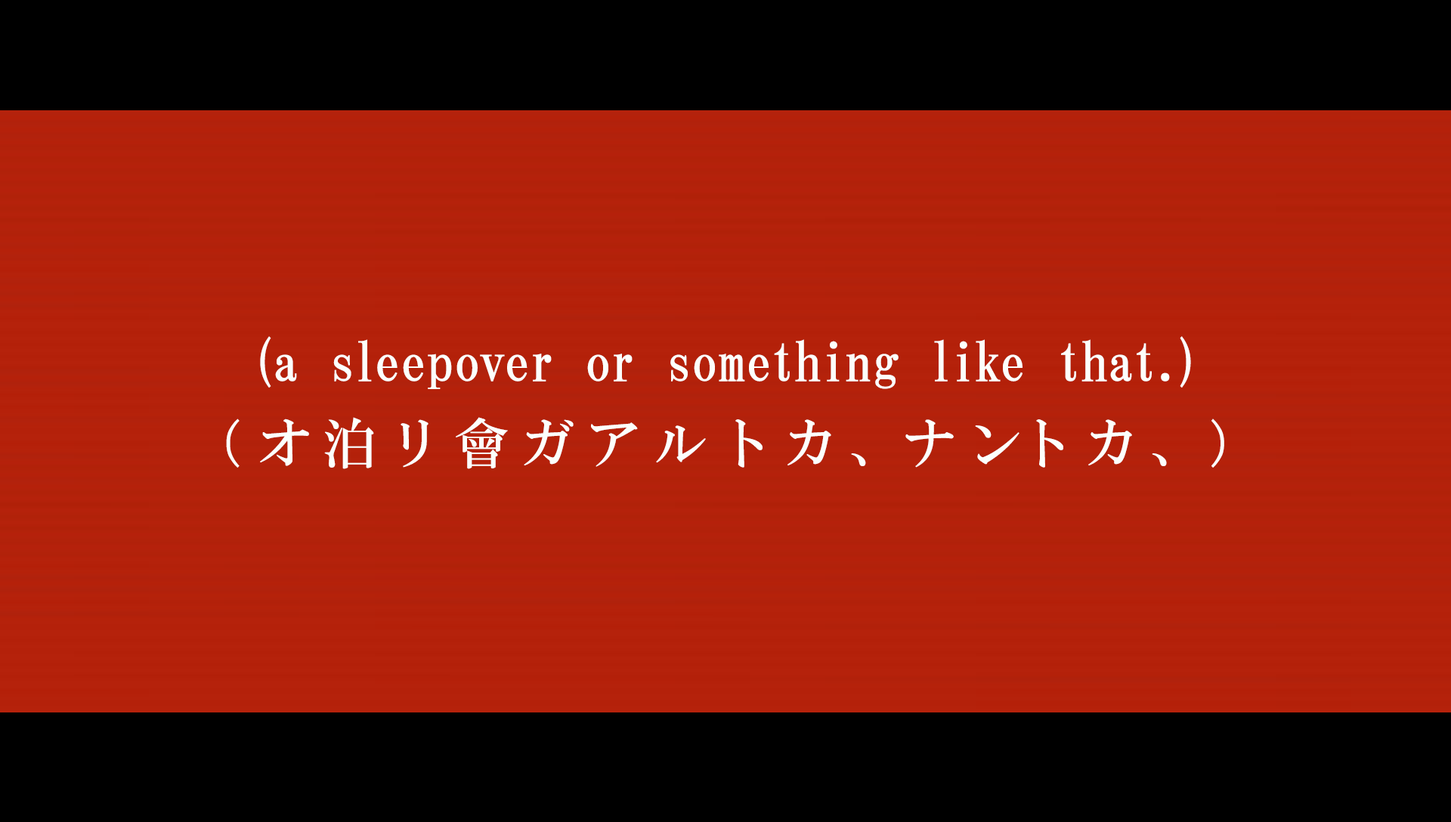
<style>
.page{position:relative;width:1451px;height:822px;background:#000000}
.page>*{position:absolute;margin:0}
.t1{font:54.4px "HGMinchoB";letter-spacing:0.01em;color:#fcfffc}
.t2{font:54.4px "HGMinchoB";letter-spacing:0.05em;color:#fcfffc}
.t3{font:54.4px "HGMinchoB";letter-spacing:0.21em;color:#fcfffc}
.t4{font:54.4px "HGMinchoB";letter-spacing:-0.03em;color:#fcfffc}
.t5{font:54.4px "HGMinchoB";letter-spacing:-0.07em;color:#fcfffc}
</style>
<div class="page">
<p class="t1" style="left:260px;top:336px;width:931px;height:53px"><span class="t2">(</span>a sleepover or something like tha<span class="t2">t.</span>)</p>
<p class="t3" style="left:226px;top:417px;width:998px;height:52px">（オ泊リ會ガアルトカ<span class="t4">、</span>ナ<span class="t5">ン</span>トカ<span class="t1">、</span>）</p>
</div>
